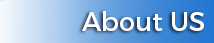
<style>
.page{position:relative;width:214px;height:43px}
.page>*{position:absolute;margin:0}
.t1{font:26px "Montserrat-Regular";color:#ffffff}
</style>
<div class="page">
<p class="t1" style="left:82px;top:11px;width:122px;height:20px">About US</p>
</div>
